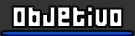
<style>
.page{position:relative;width:135px;height:36px;background:#333333}
.page>*{position:absolute;margin:0}
.t1{font:26px "04b19"}
</style>
<div class="page">
<p class="t1" style="left:12px;top:6px;width:111px;height:21px">ObJetivo</p>
</div>
